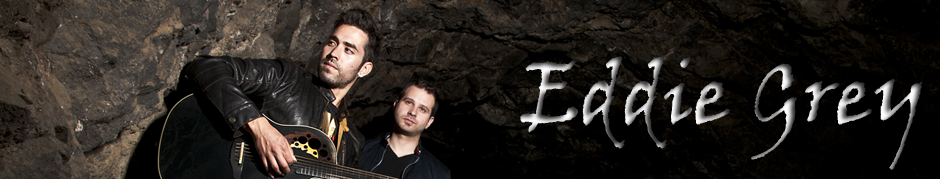
<style>
.page{position:relative;width:940px;height:179px}
.page>*{position:absolute;margin:0}
.t1{font:85px "VinerHandITC"}
</style>
<div class="page">
<p class="t1" style="left:520px;top:56px;width:403px;height:114px">Eddie Grey</p>
</div>
